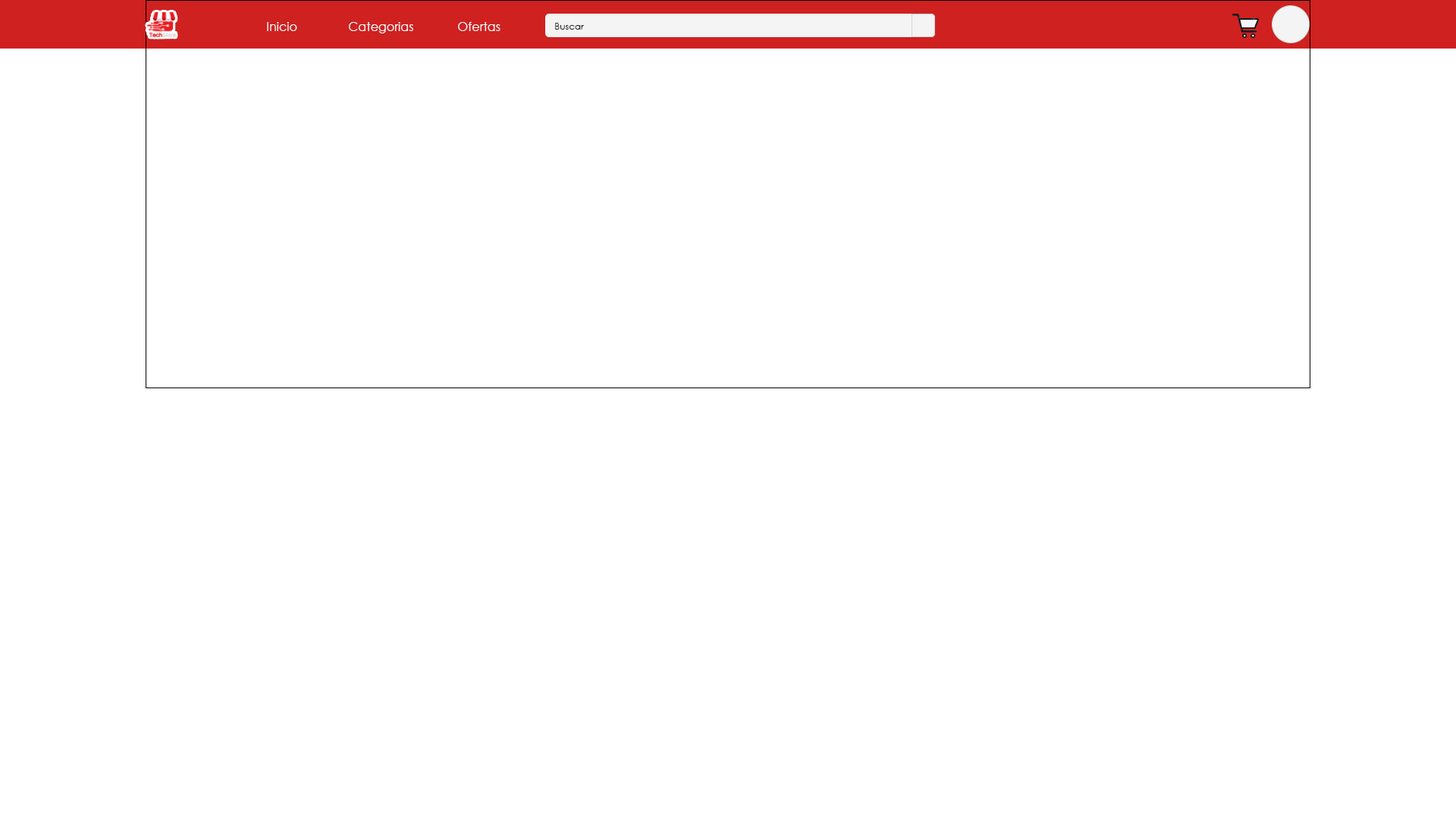
<style>
.page{position:relative;width:1456px;height:819px;background:#ffffff}
.page>*{position:absolute;margin:0}
.t1{font:12.1px "CenturyGothic";color:#f4f4f4}
.t2{font:9.1px "CenturyGothic";color:#1f1f1f}
</style>
<div class="page">
<p class="t1" style="left:267px;top:22px;width:233px;height:11px">Inicio  Categorias  Ofertas</p>
<p class="t2" style="left:555px;top:23px;width:29px;height:7px">Buscar</p>
</div>
